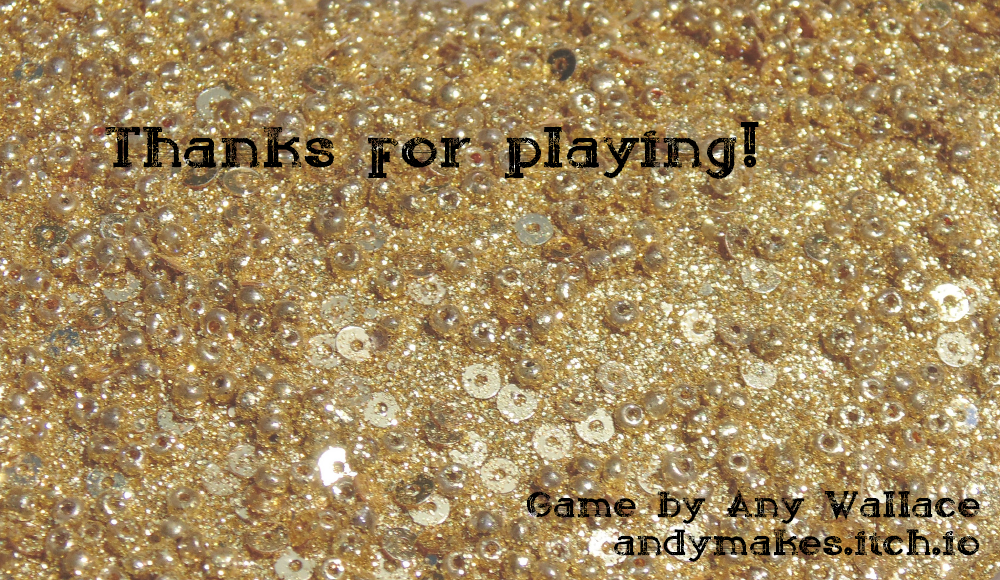
<style>
.page{position:relative;width:1000px;height:580px}
.page>*{position:absolute;margin:0}
.t1{font:50px "sailorgrunge";color:#000000}
.t2{font:32px "sailorgrunge";color:#000000}
</style>
<div class="page">
<p class="t1" style="left:105px;top:122px;width:654px;height:57px">Thanks for playing!</p>
<p class="t2" style="left:526px;top:489px;width:454px;height:73px;text-align:right">Game by Any Wallace<br>andymakes.itch.io</p>
</div>
